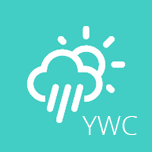
<style>
.page{position:relative;width:152px;height:152px;background:#42cec5}
.page>*{position:absolute;margin:0}
.t1{font:26.8px "OpenSans-Light";color:#ffffff}
</style>
<div class="page">
<p class="t1" style="left:82px;top:116px;width:55px;height:19px">YWC</p>
</div>
